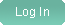
<style>
.page{position:relative;width:65px;height:25px;background:#6ab29f}
.page>*{position:absolute;margin:0}
.t1{font:12px "ArialMT";letter-spacing:0.01em;color:#ffffff}
</style>
<div class="page">
<p class="t1" style="left:16px;top:7px;width:33px;height:11px">Log In</p>
</div>
